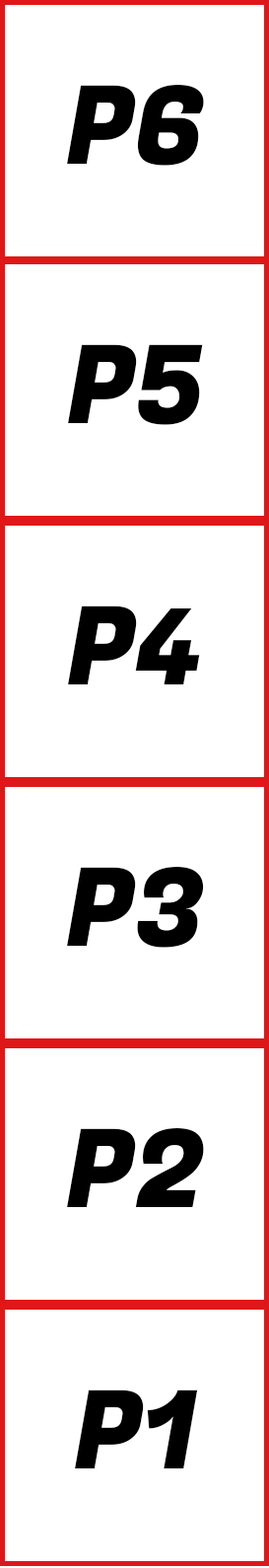
<style>
.page{position:relative;width:269px;height:1568px;background:#ffffff}
.page>*{position:absolute;margin:0}
.t1{font:108.5px "FugazOne-Regular";color:#000000}
</style>
<div class="page">
<p class="t1" style="left:67px;top:85px;width:137px;height:81px">P6</p>
<p class="t1" style="left:68px;top:344px;width:135px;height:81px">P5</p>
<p class="t1" style="left:68px;top:606px;width:132px;height:78px">P4</p>
<p class="t1" style="left:67px;top:867px;width:137px;height:81px">P3</p>
<p class="t1" style="left:67px;top:1128px;width:137px;height:79px">P2</p>
<p class="t1" style="left:75px;top:1390px;width:123px;height:78px">P1</p>
</div>
